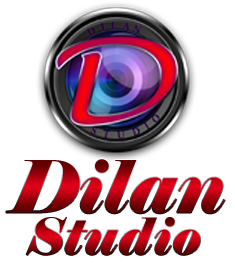
<style>
.page{position:relative;width:235px;height:263px;background:#ffffff}
.page>*{position:absolute;margin:0}
.t1{font:72px "Elephant-Italic"}
.t2{font:50px "Elephant-Italic";font-weight:bold}
</style>
<div class="page">
<p class="t1" style="left:6px;top:159px;width:219px;height:55px">Dilan</p>
<p class="t2" style="left:26px;top:217px;width:174px;height:38px">Studio</p>
</div>
